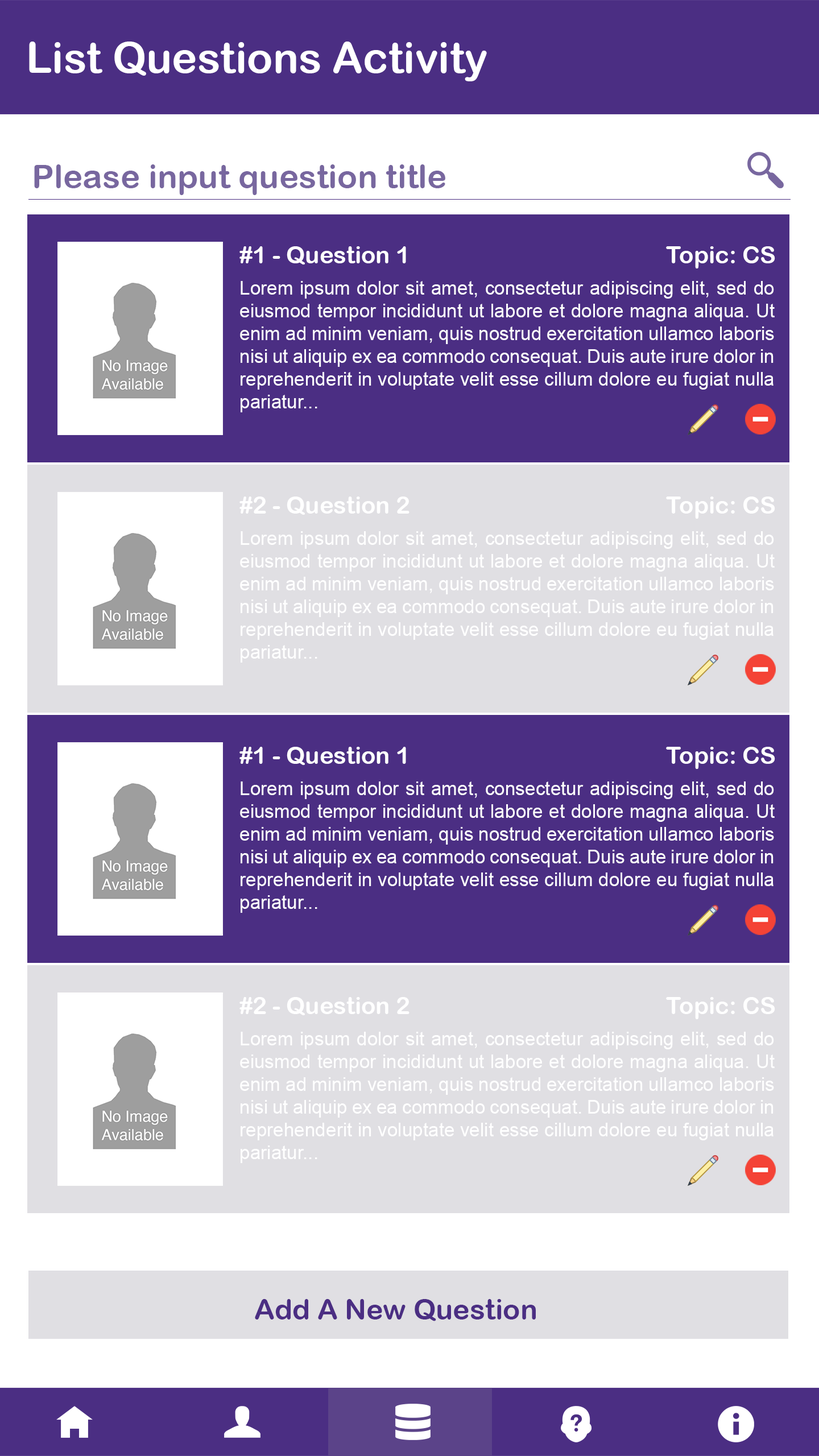
<style>
.page{position:relative;width:819px;height:1456px;background:#ffffff}
.page>*{position:absolute;margin:0}
.t1{font:42.7px "ArialRoundedMTBold";color:#ffffff}
.t2{font:33.2px "ArialRoundedMTBold";color:#78679f}
.t3{font:23.7px "ArialRoundedMTBold";color:#ffffff}
.t4{font:19px "ArialMT";color:#ffffff}
.t5{font:28.4px "ArialRoundedMTBold";color:#4b2e83}
</style>
<div class="page">
<p class="t1" style="left:29px;top:42px;width:458px;height:39px">List Questions Activity</p>
<p class="t2" style="left:34px;top:164px;width:411px;height:31px">Please input question title</p>
<p class="t3" style="left:239px;top:246px;width:167px;height:19px">#1 - Question 1</p>
<p class="t3" style="left:666px;top:246px;width:109px;height:22px">Topic: CS</p>
<p class="t4" style="left:240px;top:281px;width:535px;height:131px;text-align:justify">Lorem ipsum dolor sit amet, consectetur adipiscing elit, sed do eiusmod tempor incididunt ut labore et dolore magna aliqua. Ut enim ad minim veniam, quis nostrud exercitation ullamco laboris nisi ut aliquip ex ea commodo consequat. Duis aute irure dolor in reprehenderit in voluptate velit esse cillum dolore eu fugiat nulla pariatur...</p>
<p class="t3" style="left:239px;top:497px;width:170px;height:18px">#2 - Question 2</p>
<p class="t3" style="left:666px;top:497px;width:109px;height:22px">Topic: CS</p>
<p class="t4" style="left:240px;top:531px;width:535px;height:132px;text-align:justify">Lorem ipsum dolor sit amet, consectetur adipiscing elit, sed do eiusmod tempor incididunt ut labore et dolore magna aliqua. Ut enim ad minim veniam, quis nostrud exercitation ullamco laboris nisi ut aliquip ex ea commodo consequat. Duis aute irure dolor in reprehenderit in voluptate velit esse cillum dolore eu fugiat nulla pariatur...</p>
<p class="t3" style="left:239px;top:747px;width:167px;height:19px">#1 - Question 1</p>
<p class="t3" style="left:666px;top:747px;width:109px;height:22px">Topic: CS</p>
<p class="t4" style="left:240px;top:781px;width:535px;height:132px;text-align:justify">Lorem ipsum dolor sit amet, consectetur adipiscing elit, sed do eiusmod tempor incididunt ut labore et dolore magna aliqua. Ut enim ad minim veniam, quis nostrud exercitation ullamco laboris nisi ut aliquip ex ea commodo consequat. Duis aute irure dolor in reprehenderit in voluptate velit esse cillum dolore eu fugiat nulla pariatur...</p>
<p class="t3" style="left:239px;top:997px;width:170px;height:19px">#2 - Question 2</p>
<p class="t3" style="left:666px;top:997px;width:109px;height:22px">Topic: CS</p>
<p class="t4" style="left:240px;top:1032px;width:535px;height:131px;text-align:justify">Lorem ipsum dolor sit amet, consectetur adipiscing elit, sed do eiusmod tempor incididunt ut labore et dolore magna aliqua. Ut enim ad minim veniam, quis nostrud exercitation ullamco laboris nisi ut aliquip ex ea commodo consequat. Duis aute irure dolor in reprehenderit in voluptate velit esse cillum dolore eu fugiat nulla pariatur...</p>
<p class="t5" style="left:255px;top:1299px;width:281px;height:22px">Add A New Question</p>
</div>
